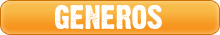
<style>
.page{position:relative;width:220px;height:35px}
.page>*{position:absolute;margin:0}
.t1{font:30px "DirtyHeadline";color:#ffffff}
</style>
<div class="page">
<p class="t1" style="left:55px;top:5px;width:107px;height:24px">GENEROS</p>
</div>
